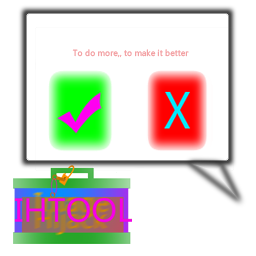
<style>
.page{position:relative;width:256px;height:256px;background:#ffffff}
.page>*{position:absolute;margin:0}
.t1{font:8px "MicrosoftYaHei";color:#f29c9f}
</style>
<div class="page">
<p class="t1" style="left:72px;top:49px;width:117px;height:9px">To do more,, to make it better</p>
</div>
